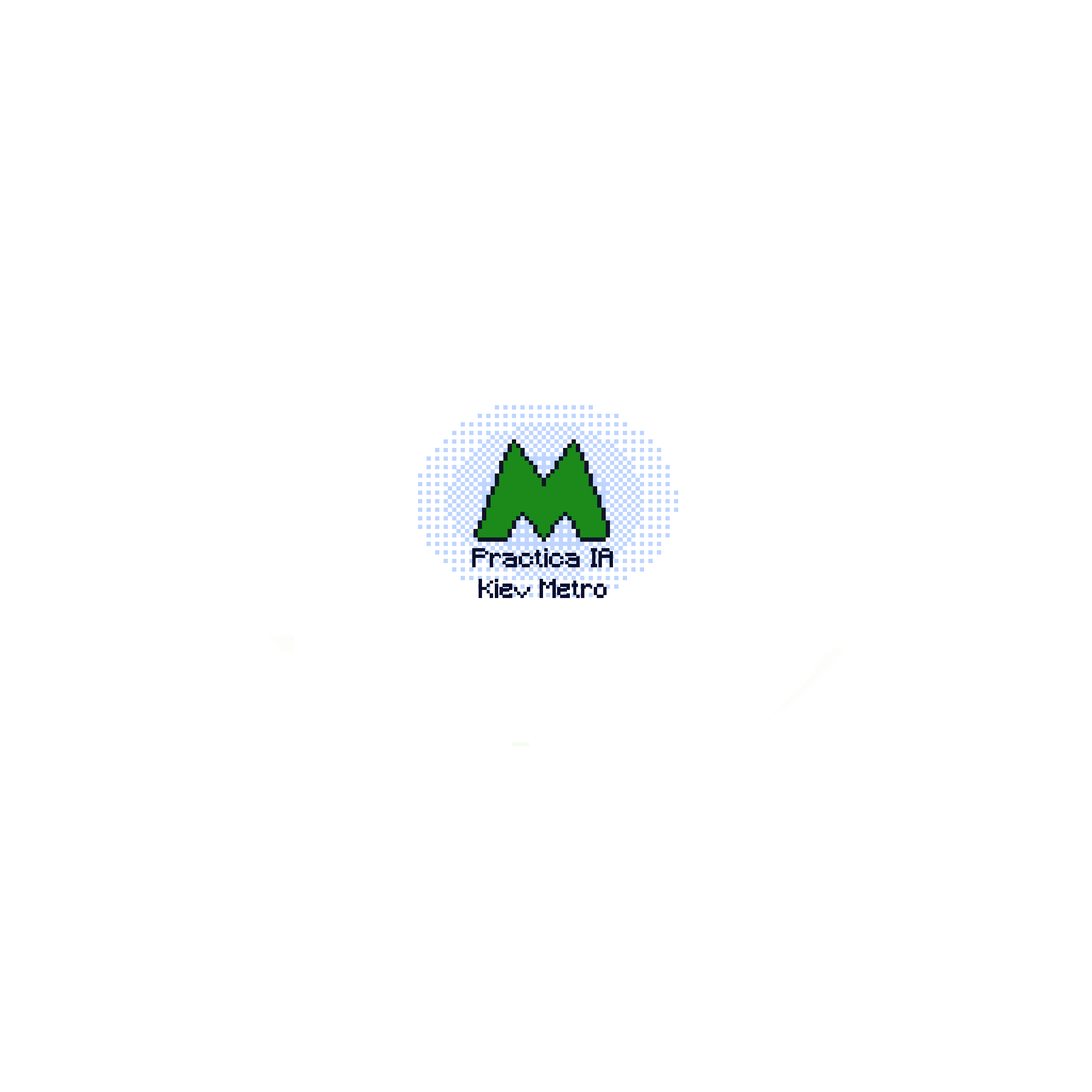
<style>
.page{position:relative;width:1092px;height:1092px;background:#ffffff}
.page>*{position:absolute;margin:0}
.t1{font:25.6px "Minecraft";color:#0a0f2f}
</style>
<div class="page">
<p class="t1" style="left:472px;top:548px;width:141px;height:50px;text-align:center">Practica IA<br>Kiev Metro</p>
</div>
